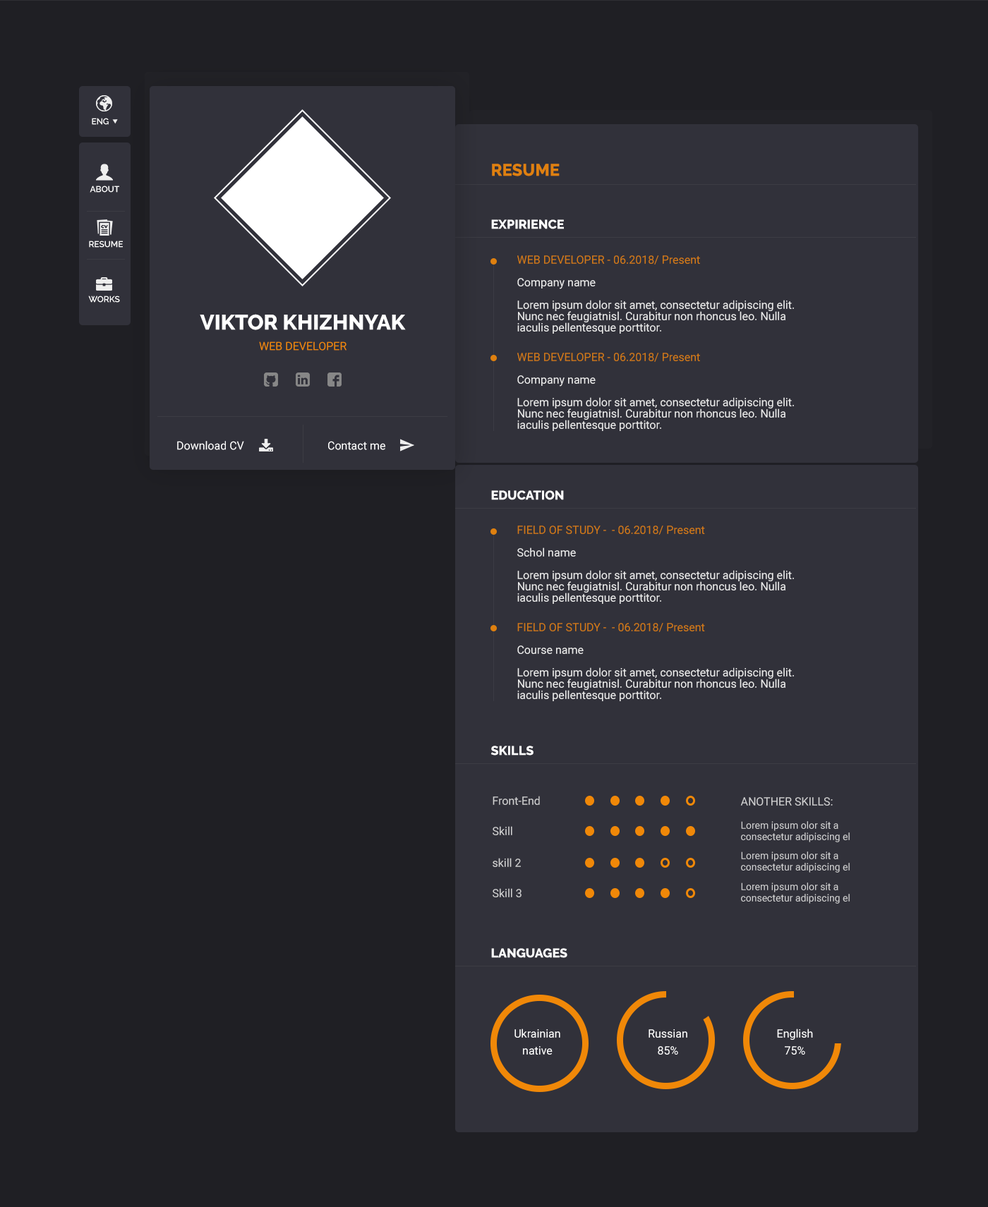
<style>
.page{position:relative;width:988px;height:1207px;background:#1f1f24}
.page>*{position:absolute;margin:0}
.t1{font:8.5px "Raleway-SemiBold";color:#ffffff;text-transform:uppercase}
.t2{font:16.9px "Raleway-ExtraBold";color:#df800f;text-transform:uppercase}
.t3{font:12.7px "Raleway-ExtraBold";color:#ffffff;text-transform:uppercase}
.t4{font:11.3px/11.3px "Roboto-Regular";color:#eeeeee}
.t5{font:11.3px/11.3px "Roboto-Regular";color:#d37a14}
.t6{font:21.2px "Raleway-ExtraBold";color:#ffffff;text-transform:uppercase}
.t7{font:11.3px "Roboto-Regular";color:#f08808;text-transform:uppercase}
.t8{font:11.3px "Roboto-Regular";color:#ffffff}
.t9{font:11.3px "Roboto-Regular";color:#d1d1d2}
.t10{font:11.3px "Roboto-Regular";color:#d1d1d2;text-transform:uppercase}
.t11{font:9.9px/11.3px "Roboto-Regular";color:#d1d1d2}
.t12{font:11.3px/16.9px "Roboto-Regular";color:#ffffff}
</style>
<div class="page">
<p class="t1" style="left:92px;top:118px;width:17px;height:7px">ENg</p>
<p class="t2" style="left:492px;top:164px;width:68px;height:12px">Resume</p>
<p class="t1" style="left:90px;top:186px;width:29px;height:7px">About</p>
<p class="t3" style="left:491px;top:219px;width:73px;height:10px">Expirience</p>
<p class="t1" style="left:89px;top:241px;width:34px;height:7px">Resume</p>
<p class="t4" style="left:517px;top:255px;width:277px;height:79px"><span class="t5">WEB DEVELOPER - 06.2018/ Present<br><br></span>Company name<br><br>Lorem ipsum dolor sit amet, consectetur adipiscing elit. <br>Nunc nec feugiatnisl. Curabitur non rhoncus leo. Nulla <br>iaculis pellentesque porttitor.</p>
<p class="t1" style="left:88px;top:296px;width:32px;height:7px">works</p>
<p class="t6" style="left:200px;top:314px;width:206px;height:16px">Viktor Khizhnyak</p>
<p class="t7" style="left:259px;top:341px;width:87px;height:10px">Web Developer</p>
<p class="t4" style="left:517px;top:353px;width:277px;height:78px"><span class="t5">WEB DEVELOPER - 06.2018/ Present<br><br></span>Company name<br><br>Lorem ipsum dolor sit amet, consectetur adipiscing elit. <br>Nunc nec feugiatnisl. Curabitur non rhoncus leo. Nulla <br>iaculis pellentesque porttitor.</p>
<p class="t8" style="left:177px;top:441px;width:67px;height:9px">Download CV</p>
<p class="t8" style="left:328px;top:441px;width:57px;height:9px">Contact me</p>
<p class="t3" style="left:491px;top:490px;width:73px;height:10px">Education</p>
<p class="t4" style="left:517px;top:526px;width:277px;height:78px"><span class="t5">FIELD OF STUDY -  - 06.2018/ Present<br><br></span>Schol name<br><br>Lorem ipsum dolor sit amet, consectetur adipiscing elit. <br>Nunc nec feugiatnisl. Curabitur non rhoncus leo. Nulla <br>iaculis pellentesque porttitor.</p>
<p class="t4" style="left:517px;top:623px;width:277px;height:78px"><span class="t5">FIELD OF STUDY -  - 06.2018/ Present<br><br></span>Course name<br><br>Lorem ipsum dolor sit amet, consectetur adipiscing elit. <br>Nunc nec feugiatnisl. Curabitur non rhoncus leo. Nulla <br>iaculis pellentesque porttitor.</p>
<p class="t3" style="left:490px;top:746px;width:43px;height:10px">Skills</p>
<p class="t9" style="left:492px;top:796px;width:48px;height:9px">Front-End</p>
<p class="t10" style="left:740px;top:797px;width:93px;height:9px">Another skills:</p>
<p class="t11" style="left:741px;top:821px;width:108px;height:21px">Lorem ipsum olor sit a <br>consectetur adipiscing el</p>
<p class="t9" style="left:492px;top:826px;width:20px;height:9px">Skill</p>
<p class="t9" style="left:492px;top:858px;width:29px;height:9px">skill 2</p>
<p class="t11" style="left:741px;top:852px;width:108px;height:21px">Lorem ipsum olor sit a <br>consectetur adipiscing el</p>
<p class="t9" style="left:492px;top:888px;width:29px;height:9px">Skill 3</p>
<p class="t11" style="left:741px;top:883px;width:108px;height:21px">Lorem ipsum olor sit a <br>consectetur adipiscing el</p>
<p class="t3" style="left:491px;top:948px;width:76px;height:10px">Languages</p>
<p class="t12" style="left:514px;top:1029px;width:46px;height:26px;text-align:center">Ukrainian<br>native</p>
<p class="t12" style="left:648px;top:1029px;width:39px;height:26px;text-align:center">Russian<br>85%</p>
<p class="t12" style="left:777px;top:1029px;width:36px;height:26px;text-align:center">English<br>75%</p>
</div>
